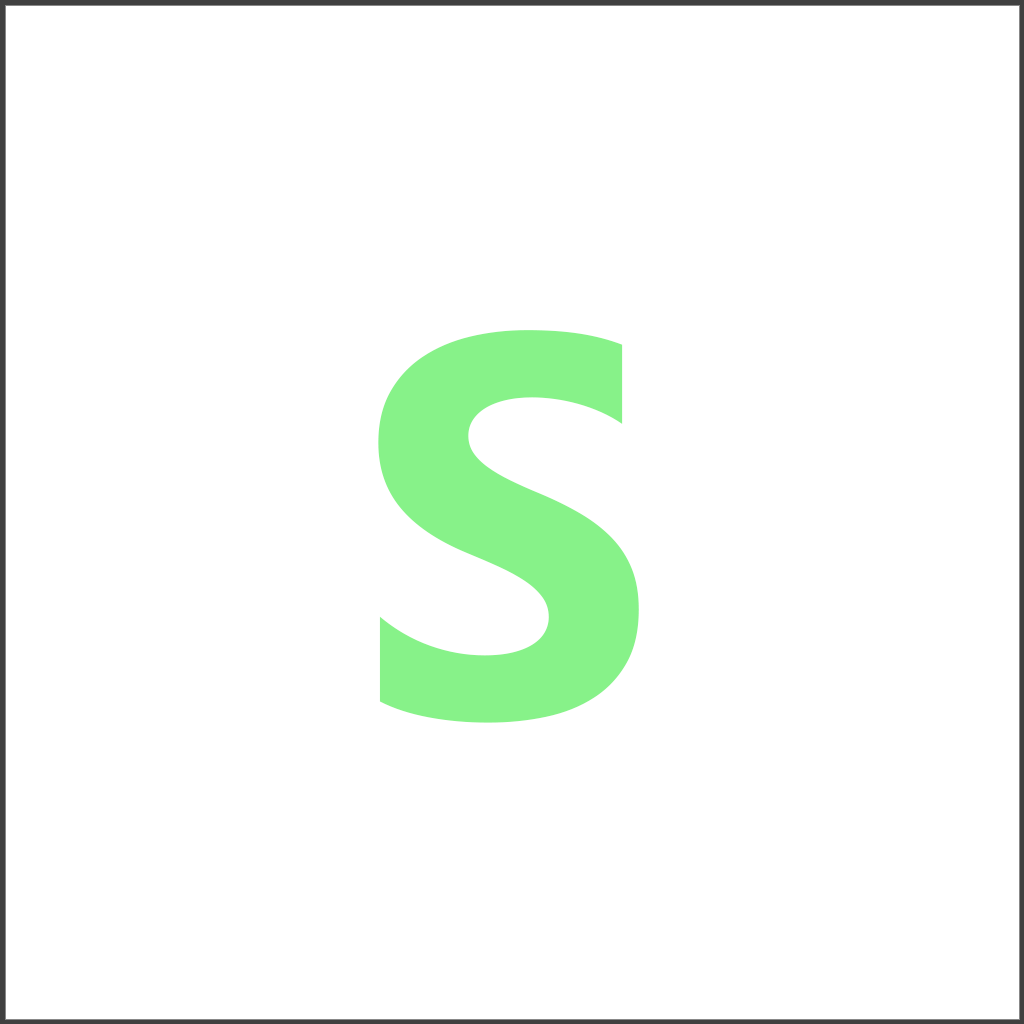
<style>
.page{position:relative;width:1024px;height:1024px;background:#ffffff}
.page>*{position:absolute;margin:0}
.t1{font:541.7px "SegoeWP-Bold";color:#87f289}
</style>
<div class="page">
<p class="t1" style="left:378px;top:330px;width:261px;height:393px">S</p>
</div>
